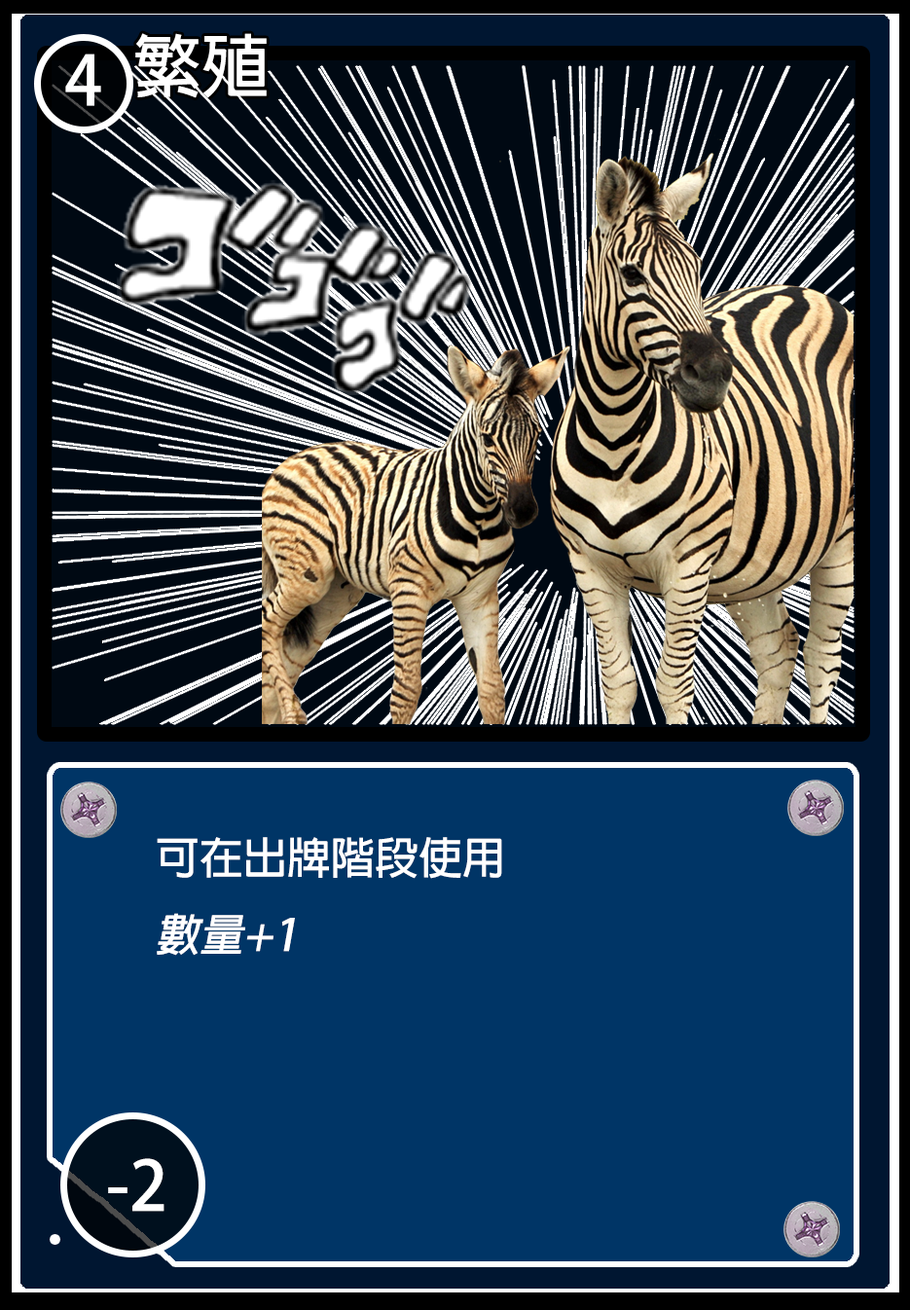
<style>
.page{position:relative;width:910px;height:1310px;background:#003566}
.page>*{position:absolute;margin:0}
.t1{font:68.1px "AdobeFanHeitiStd-Bold";color:#ffffff}
.t2{font:67.8px "AdobeFanHeitiStd-Bold";color:#ffffff}
.t3{font:43.8px "AdobeFanHeitiStd-Bold";color:#ffffff}
.t4{font:43.8px "AdobeFanHeitiStd-Bold";color:#ffffff;font-style:italic}
</style>
<div class="page">
<p class="t1" style="left:135px;top:33px;width:132px;height:65px">繁殖</p>
<p class="t2" style="left:65px;top:54px;width:36px;height:52px">4</p>
<p class="t3" style="left:157px;top:837px;width:345px;height:119px">可在出牌階段使用<br><span class="t4">數量+1</span></p>
<p class="t1" style="left:108px;top:1158px;width:57px;height:54px">-2</p>
</div>
